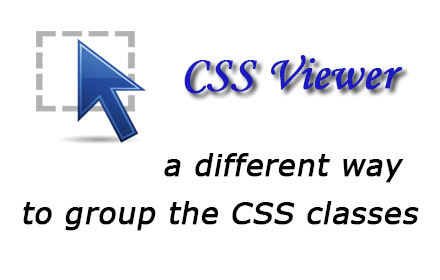
<style>
.page{position:relative;width:440px;height:280px;background:#ffffff}
.page>*{position:absolute;margin:0}
.t1{font:48px "STLiti";color:#1a1abc;font-weight:bold}
.t2{font:30px "Verdana";color:#000000;font-weight:bold;font-style:italic}
</style>
<div class="page">
<p class="t1" style="left:184px;top:55px;width:219px;height:39px">CSS Viewer</p>
<p class="t2" style="left:164px;top:153px;width:240px;height:30px">a different way</p>
<p class="t2" style="left:23px;top:201px;width:396px;height:30px">to group the CSS classes</p>
</div>
